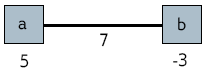
<style>
.page{position:relative;width:211px;height:74px;background:#ffffff}
.page>*{position:absolute;margin:0}
.t1{font:18px "GilliusADFNo2-Regular";color:#000000}
</style>
<div class="page">
<p class="t1" style="left:178px;top:17px;width:8px;height:14px">b</p>
<p class="t1" style="left:18px;top:20px;width:9px;height:10px">a</p>
<p class="t1" style="left:100px;top:33px;width:8px;height:14px">7</p>
<p class="t1" style="left:20px;top:54px;width:9px;height:14px">5</p>
<p class="t1" style="left:173px;top:53px;width:14px;height:14px">-3</p>
</div>
